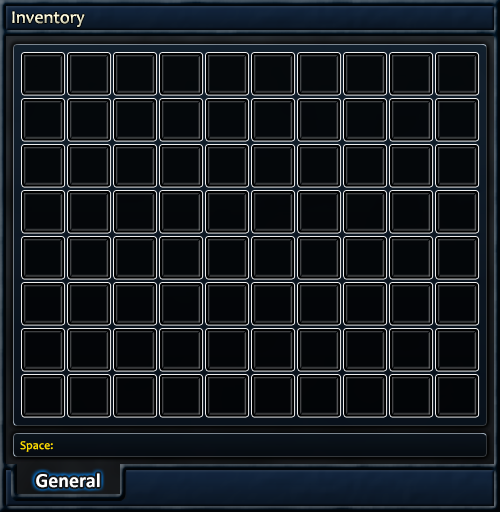
<style>
.page{position:relative;width:500px;height:512px}
.page>*{position:absolute;margin:0}
.t1{font:18px "Candara";color:#fefcdd}
.t2{font:12px "Candara";color:#fedd00}
.t3{font:20px "Calibri-Bold";color:#ffffff}
</style>
<div class="page">
<p class="t1" style="left:12px;top:11px;width:73px;height:16px">Inventory</p>
<p class="t2" style="left:20px;top:441px;width:33px;height:11px">Space:</p>
<p class="t3" style="left:36px;top:473px;width:64px;height:15px">General</p>
</div>
